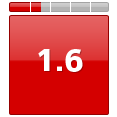
<style>
.page{position:relative;width:117px;height:117px;background:#d40000}
.page>*{position:absolute;margin:0}
.t1{font:36px "Colaborate-Bold";color:#ffffff;text-transform:uppercase}
</style>
<div class="page">
<p class="t1" style="left:38px;top:49px;width:45px;height:23px">1.6</p>
</div>
